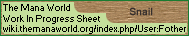
<style>
.page{position:relative;width:189px;height:36px;background:#c4df9b}
.page>*{position:absolute;margin:0}
.t1{font:9px "Small Fonts";color:#000000}
.t2{font:10px "ArialMT";color:#362f2d;font-weight:bold}
</style>
<div class="page">
<p class="t1" style="left:3px;top:4px;width:183px;height:30px">The Mana World<br>Work In Progress Sheet<br>wiki.themanaworld.org/index.php/User:Fother</p>
<p class="t2" style="left:129px;top:7px;width:24px;height:9px">Snail</p>
</div>
